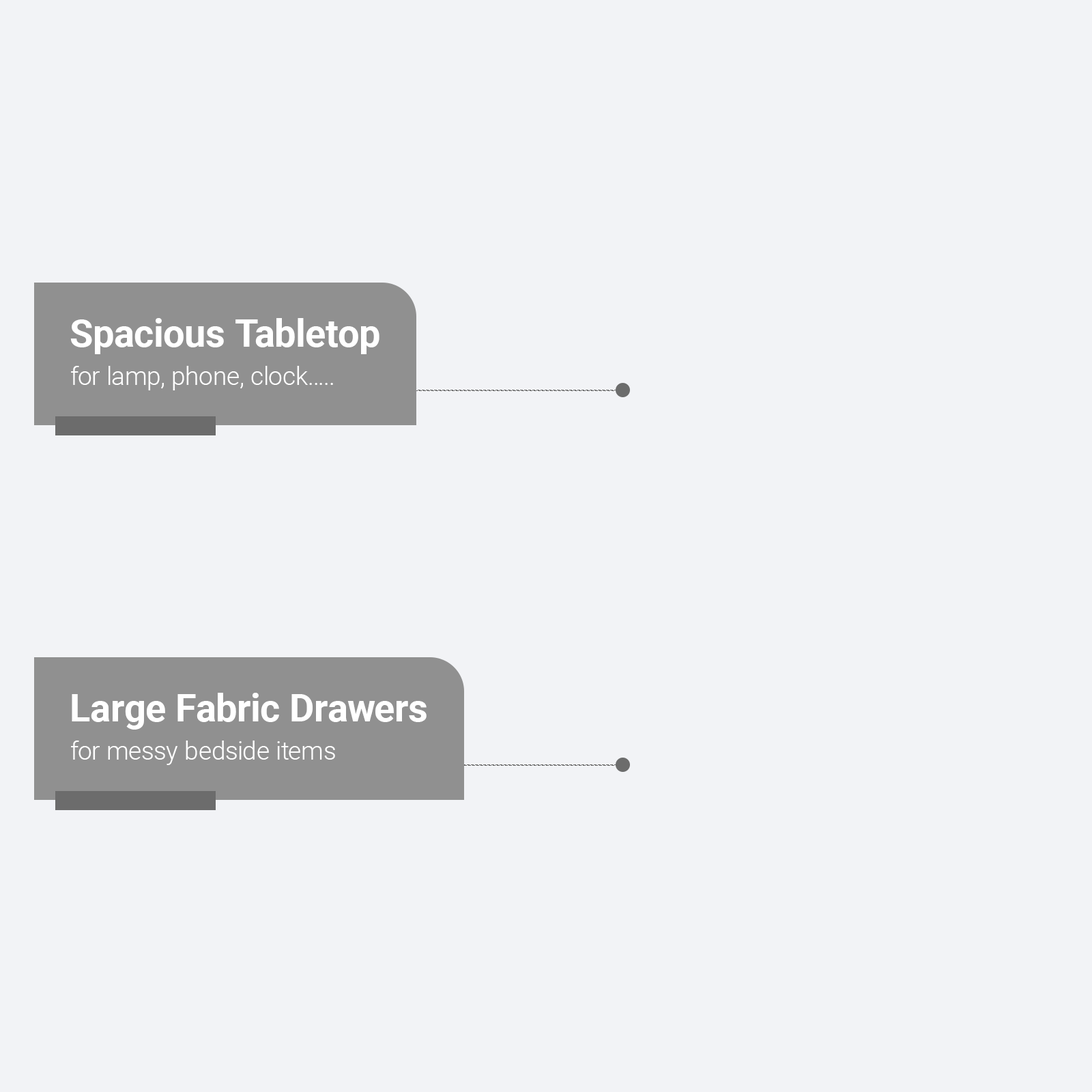
<style>
.page{position:relative;width:1092px;height:1092px;background:#f2f3f6}
.page>*{position:absolute;margin:0}
.t1{font:38.2px "Roboto-Bold";color:#ffffff}
.t2{font:25.5px "Roboto-Light";color:#ffffff}
</style>
<div class="page">
<p class="t1" style="left:70px;top:318px;width:309px;height:36px">Spacious Tabletop</p>
<p class="t2" style="left:71px;top:366px;width:262px;height:24px">for lamp, phone, clock…..</p>
<p class="t1" style="left:72px;top:693px;width:355px;height:37px">Large Fabric Drawers</p>
<p class="t2" style="left:71px;top:741px;width:264px;height:24px">for messy bedside items</p>
</div>
